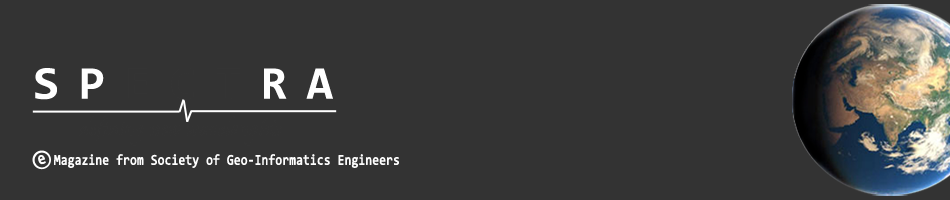
<style>
.page{position:relative;width:950px;height:200px;background:#333333}
.page>*{position:absolute;margin:0}
.t1{font:47.1px "Consolas-Bold";letter-spacing:0.4em;color:#333333}
.t2{font:47.1px "Consolas-Bold";letter-spacing:0.4em;color:#ffffff}
.t3{font:17.2px "Consolas";color:#fefefe;font-weight:bold;scale:0.81 1}
.t4{font:14.7px "Consolas";color:#fefefe;font-weight:bold;scale:0.82 1}
</style>
<div class="page">
<p class="t1" style="left:35px;top:68px;width:298px;height:32px"><span class="t2">SP</span>ECT<span class="t2">RA</span></p>
<p class="t3" style="left:38px;top:155px;width:8px;height:10px;rotate:-17deg">e</p>
<p class="t4" style="left:54px;top:154px;width:345px;height:14px">Magazine from Society of Geo-Informatics Engineers</p>
</div>
